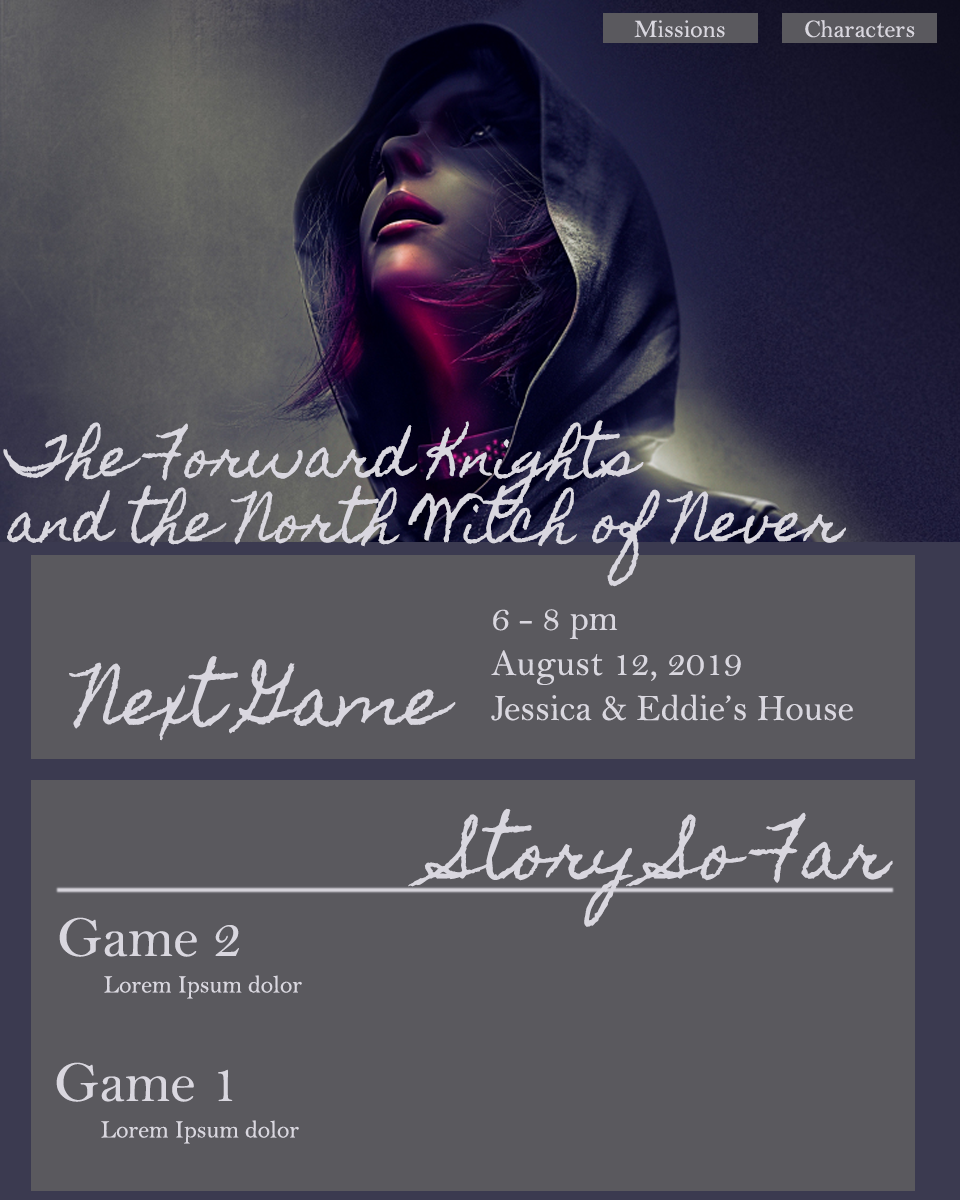
<style>
.page{position:relative;width:960px;height:1200px;background:#5a595e}
.page>*{position:absolute;margin:0}
.t1{font:25px "BellMT";color:#d9d7df}
.t2{font:54.2px "HomemadeApple-Regular";color:#d9d7df}
.t3{font:37.5px "BellMT";color:#d9d7df}
.t4{font:66.7px "HomemadeApple-Regular";color:#d9d7df}
.t5{font:58.3px "BellMT";color:#d9d7df}
</style>
<div class="page">
<p class="t1" style="left:634px;top:20px;width:91px;height:18px">Missions</p>
<p class="t1" style="left:805px;top:20px;width:110px;height:18px">Characters</p>
<p class="t2" style="left:3px;top:420px;width:843px;height:167px">The Forward Knights <br>and the North Witch of Never</p>
<p class="t3" style="left:491px;top:609px;width:362px;height:112px">6 - 8 pm<br>August 12, 2019<br>Jessica &amp; Eddie’s House</p>
<p class="t4" style="left:69px;top:656px;width:387px;height:85px">Next Game</p>
<p class="t4" style="left:408px;top:808px;width:485px;height:119px">Story So Far</p>
<p class="t5" style="left:59px;top:917px;width:180px;height:40px">Game 2</p>
<p class="t1" style="left:104px;top:975px;width:198px;height:24px">Lorem Ipsum dolor</p>
<p class="t5" style="left:56px;top:1062px;width:177px;height:40px">Game 1</p>
<p class="t1" style="left:101px;top:1120px;width:198px;height:24px">Lorem Ipsum dolor</p>
</div>
